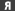
<style>
.page{position:relative;width:15px;height:11px;background:#3e3e3e}
.page>*{position:absolute;margin:0}
.t1{font:11.6px "MyriadPro-Semibold";letter-spacing:0.1em;color:#ffffff}
</style>
<div class="page">
<p class="t1" style="left:4px;top:1px;width:7px;height:9px;rotate:180deg">R</p>
</div>
